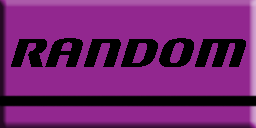
<style>
.page{position:relative;width:256px;height:128px;background:#92278f}
.page>*{position:absolute;margin:0}
.t1{font:64px "Motorwerk";color:#000000}
</style>
<div class="page">
<p class="t1" style="left:11px;top:38px;width:235px;height:29px">Random</p>
</div>
